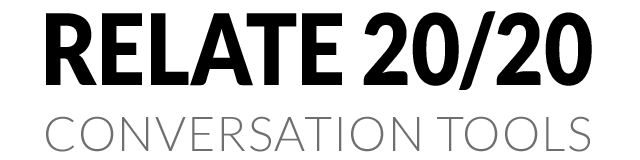
<style>
.page{position:relative;width:640px;height:160px;background:#ffffff}
.page>*{position:absolute;margin:0}
.t1{font:98.2px "Lato-Black";color:#000000;scale:0.87 1}
.t2{font:48px "Lato-Light";letter-spacing:0.025em;color:#6f6f6f}
</style>
<div class="page">
<p class="t1" style="left:46px;top:11px;width:546px;height:79px">RELATE 20/20</p>
<p class="t2" style="left:46px;top:116px;width:544px;height:36px">CONVERSATION TOOLS</p>
</div>
